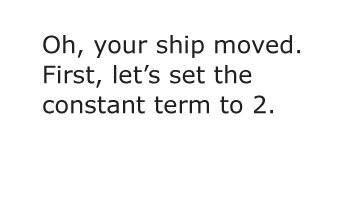
<style>
.page{position:relative;width:340px;height:222px;background:#ffffff}
.page>*{position:absolute;margin:0}
.t1{font:24px/30px "Verdana";color:#202020}
</style>
<div class="page">
<p class="t1" style="left:43px;top:35px;width:257px;height:79px">Oh, your ship moved. First, let’s set the constant term to 2.</p>
</div>
